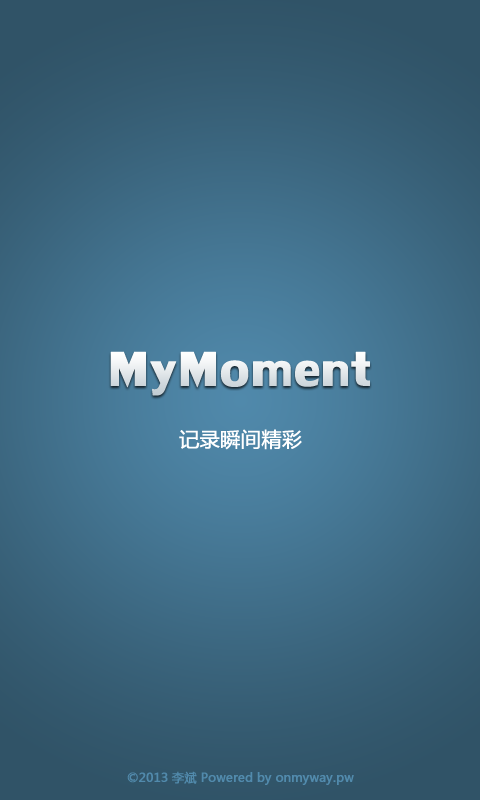
<style>
.page{position:relative;width:480px;height:800px}
.page>*{position:absolute;margin:0}
.t1{font:72px "LilyUPCBold";color:#e6ebed;font-weight:bold}
.t2{font:20px "MicrosoftYaHei";color:#ffffff;font-weight:bold}
.t3{font:12px "MicrosoftYaHei";color:#518aac;font-weight:bold}
</style>
<div class="page">
<p class="t1" style="left:110px;top:351px;width:260px;height:45px">MyMoment</p>
<p class="t2" style="left:179px;top:429px;width:123px;height:21px">记录瞬间精彩</p>
<p class="t3" style="left:127px;top:771px;width:227px;height:14px">©2013 李斌 Powered by onmyway.pw</p>
</div>
